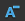
<style>
.page{position:relative;width:25px;height:21px;background:#333333}
.page>*{position:absolute;margin:0}
.t1{font:24px "ArialMT";color:#4aabe8}
.t2{font:14px "Arial-BoldMT";color:#49a9e8}
</style>
<div class="page">
<p class="t1" style="left:13px;top:5px;width:7px;height:4px">-</p>
<p class="t2" style="left:5px;top:7px;width:11px;height:11px">A</p>
</div>
